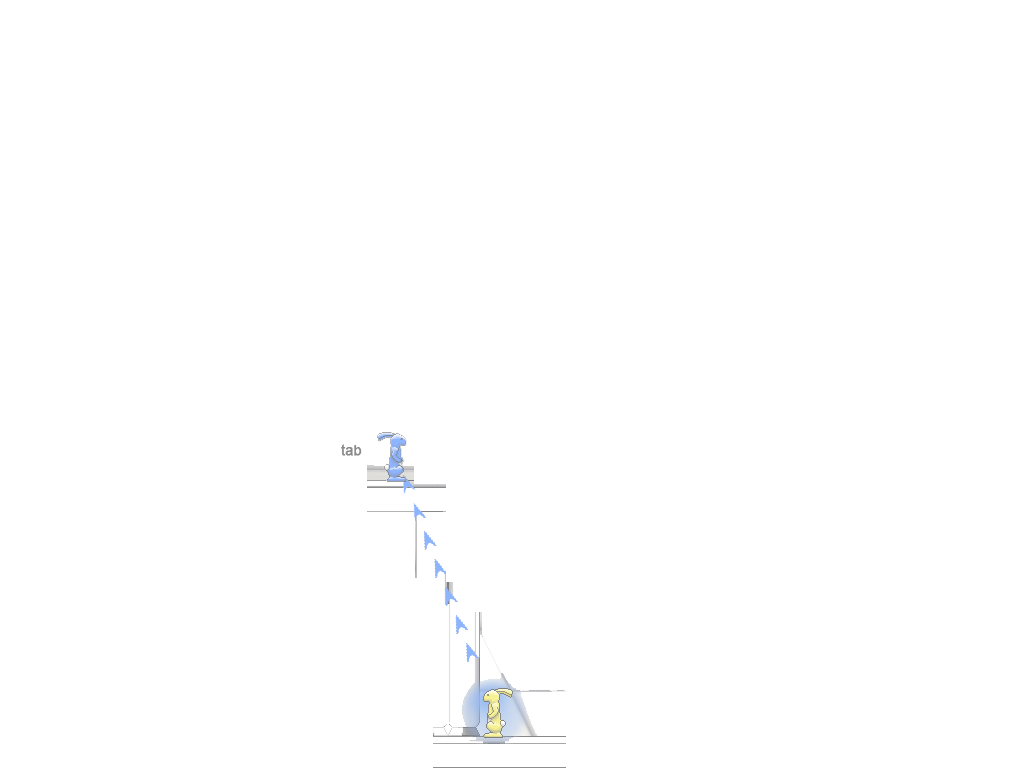
<style>
.page{position:relative;width:1024px;height:768px;background:#ffffff}
.page>*{position:absolute;margin:0}
.t1{font:14px "ArialMT";color:#8a8a8a;font-weight:bold}
</style>
<div class="page">
<p class="t1" style="left:341px;top:444px;width:21px;height:12px">tab</p>
</div>
